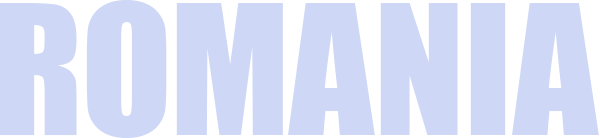
<style>
.page{position:relative;width:600px;height:138px;background:#ced8f6}
.page>*{position:absolute;margin:0}
.t1{font:167px "Impact";color:#ced8f6}
.t2{font:167px "Impact";letter-spacing:-0.01em;color:#ced8f6}
.t3{font:167px "Impact";letter-spacing:-0.005em;color:#ced8f6}
</style>
<div class="page">
<p class="t1" style="left:0px;top:0px;width:599px;height:138px"><span class="t2">RO</span><span class="t3">M</span>ANIA</p>
</div>
